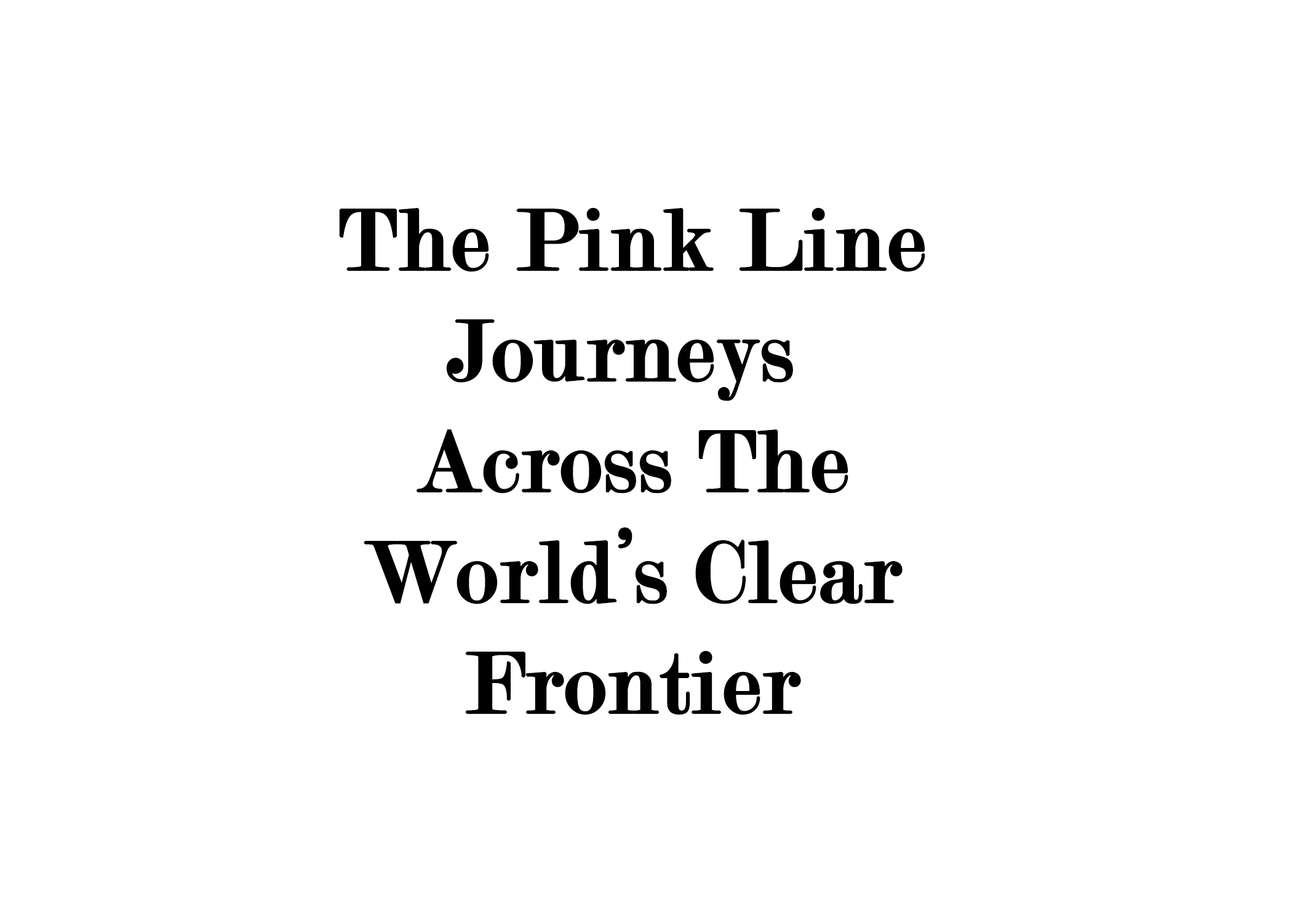
<style>
.page{position:relative;width:1292px;height:923px;background:#ffffff}
.page>*{position:absolute;margin:0}
.t1{font:92.3px "Modern-Regular";color:#000000;font-weight:bold}
</style>
<div class="page">
<p class="t1" style="left:339px;top:207px;width:586px;height:508px;text-align:center">The Pink Line<br>Journeys <br>Across The<br>World’s Clear<br>Frontier</p>
</div>
